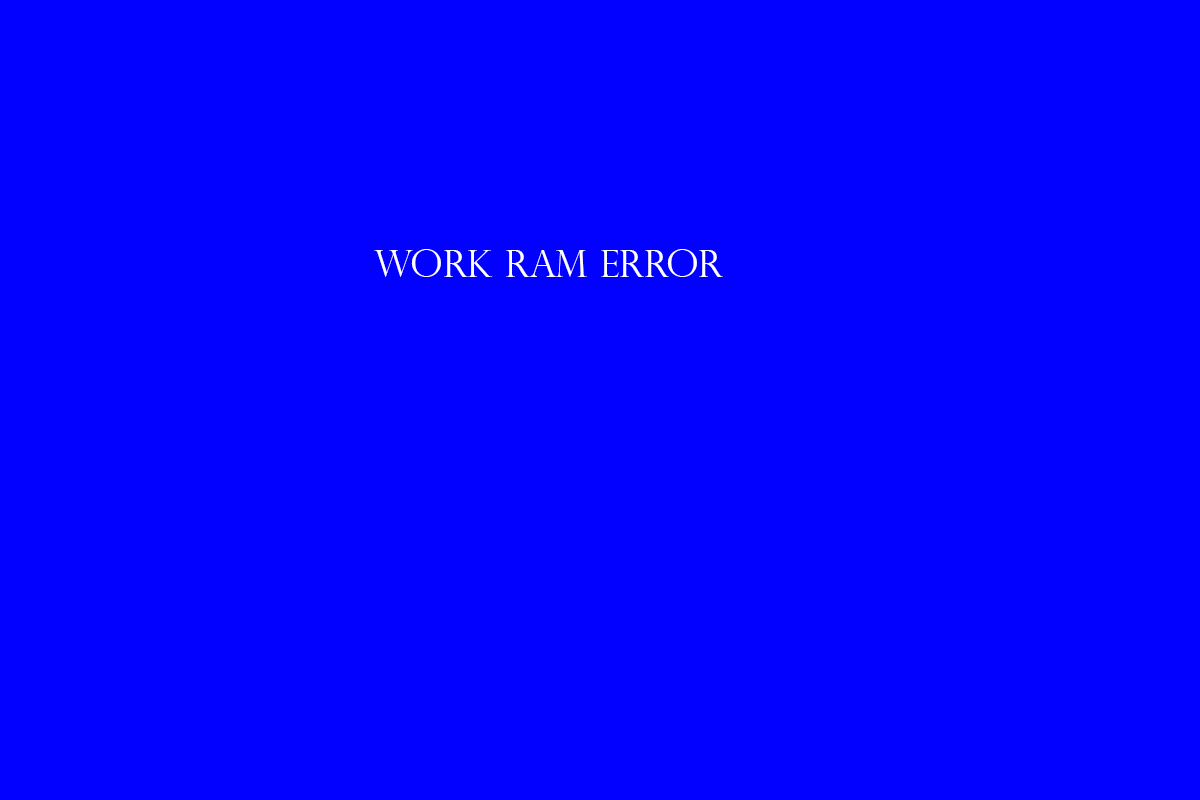
<style>
.page{position:relative;width:1200px;height:800px;background:#0200ff}
.page>*{position:absolute;margin:0}
.t1{font:37.5px "PerpetuaTitlingMT-Light";color:#ffffff}
</style>
<div class="page">
<p class="t1" style="left:374px;top:249px;width:349px;height:28px">Work Ram Error</p>
</div>
